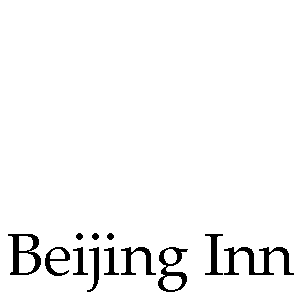
<style>
.page{position:relative;width:300px;height:300px;background:#ffffff}
.page>*{position:absolute;margin:0}
.t1{font:60px "PalatinoLinotype-Roman";color:#000000}
</style>
<div class="page">
<p class="t1" style="left:8px;top:233px;width:286px;height:59px">Beijing Inn</p>
</div>
